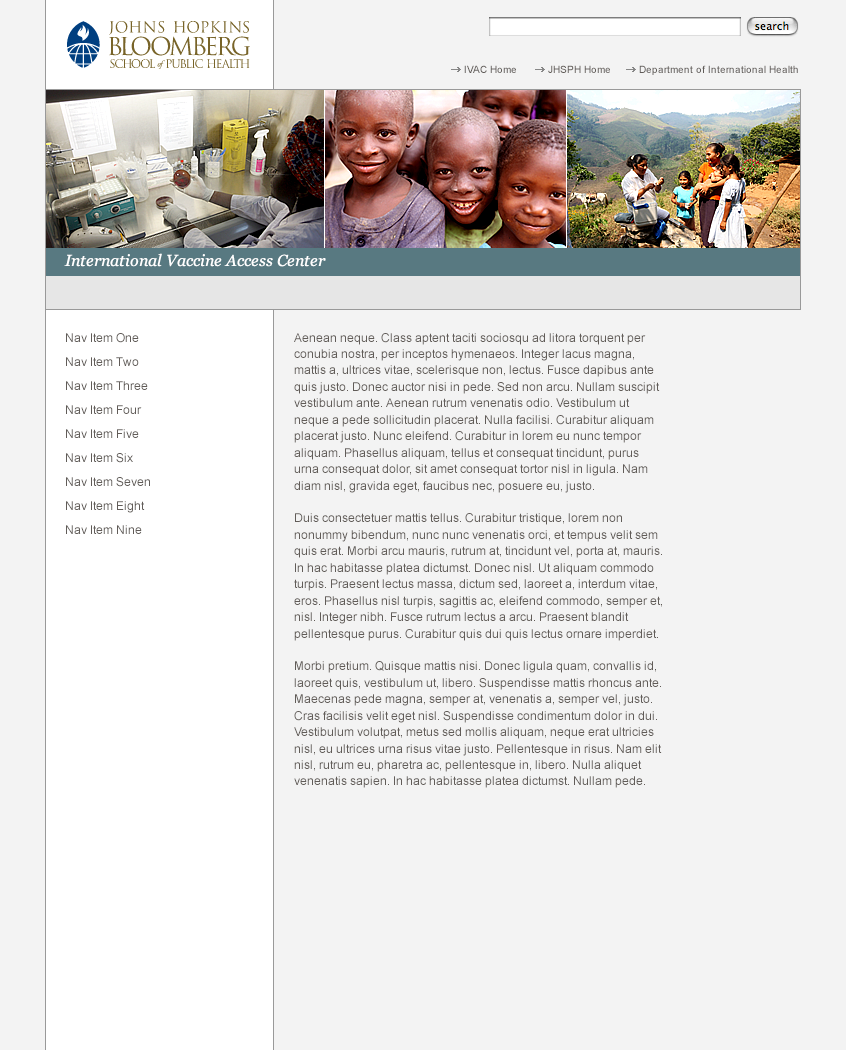
<style>
.page{position:relative;width:846px;height:1050px;background:#f3f3f3}
.page>*{position:absolute;margin:0}
.t1{font:10px "ArialMT";color:#605b58}
.t2{font:10px "ArialMT";color:#615c58}
.t3{font:16px "Georgia-Italic";color:#ffffff}
.t4{font:12px/24px "ArialMT";color:#615c58}
.t5{font:12px/16.4px "ArialMT";color:#615c58}
</style>
<div class="page">
<p class="t1" style="left:464px;top:65px;width:52px;height:8px">IVAC Home</p>
<p class="t2" style="left:548px;top:65px;width:62px;height:8px">JHSPH Home</p>
<p class="t1" style="left:639px;top:65px;width:159px;height:10px">Department of International Health</p>
<p class="t3" style="left:64px;top:253px;width:262px;height:14px">International Vaccine Access Center</p>
<p class="t4" style="left:66px;top:333px;width:84px;height:201px">Nav Item One<br>Nav Item Two<br>Nav Item Three<br>Nav Item Four<br>Nav Item Five<br>Nav Item Six<br>Nav Item Seven<br>Nav Item Eight<br>Nav Item Nine</p>
<p class="t5" style="left:294px;top:333px;width:368px;height:455px">Aenean neque. Class aptent taciti sociosqu ad litora torquent per conubia nostra, per inceptos hymenaeos. Integer lacus magna, mattis a, ultrices vitae, scelerisque non, lectus. Fusce dapibus ante quis justo. Donec auctor nisi in pede. Sed non arcu. Nullam suscipit vestibulum ante. Aenean rutrum venenatis odio. Vestibulum ut neque a pede sollicitudin placerat. Nulla facilisi. Curabitur aliquam placerat justo. Nunc eleifend. Curabitur in lorem eu nunc tempor aliquam. Phasellus aliquam, tellus et consequat tincidunt, purus urna consequat dolor, sit amet consequat tortor nisl in ligula. Nam diam nisl, gravida eget, faucibus nec, posuere eu, justo.<br><br>Duis consectetuer mattis tellus. Curabitur tristique, lorem non nonummy bibendum, nunc nunc venenatis orci, et tempus velit sem quis erat. Morbi arcu mauris, rutrum at, tincidunt vel, porta at, mauris. In hac habitasse platea dictumst. Donec nisl. Ut aliquam commodo turpis. Praesent lectus massa, dictum sed, laoreet a, interdum vitae, eros. Phasellus nisl turpis, sagittis ac, eleifend commodo, semper et, nisl. Integer nibh. Fusce rutrum lectus a arcu. Praesent blandit pellentesque purus. Curabitur quis dui quis lectus ornare imperdiet.<br><br>Morbi pretium. Quisque mattis nisi. Donec ligula quam, convallis id, laoreet quis, vestibulum ut, libero. Suspendisse mattis rhoncus ante. Maecenas pede magna, semper at, venenatis a, semper vel, justo. Cras facilisis velit eget nisl. Suspendisse condimentum dolor in dui. Vestibulum volutpat, metus sed mollis aliquam, neque erat ultricies nisl, eu ultrices urna risus vitae justo. Pellentesque in risus. Nam elit nisl, rutrum eu, pharetra ac, pellentesque in, libero. Nulla aliquet venenatis sapien. In hac habitasse platea dictumst. Nullam pede.</p>
</div>
